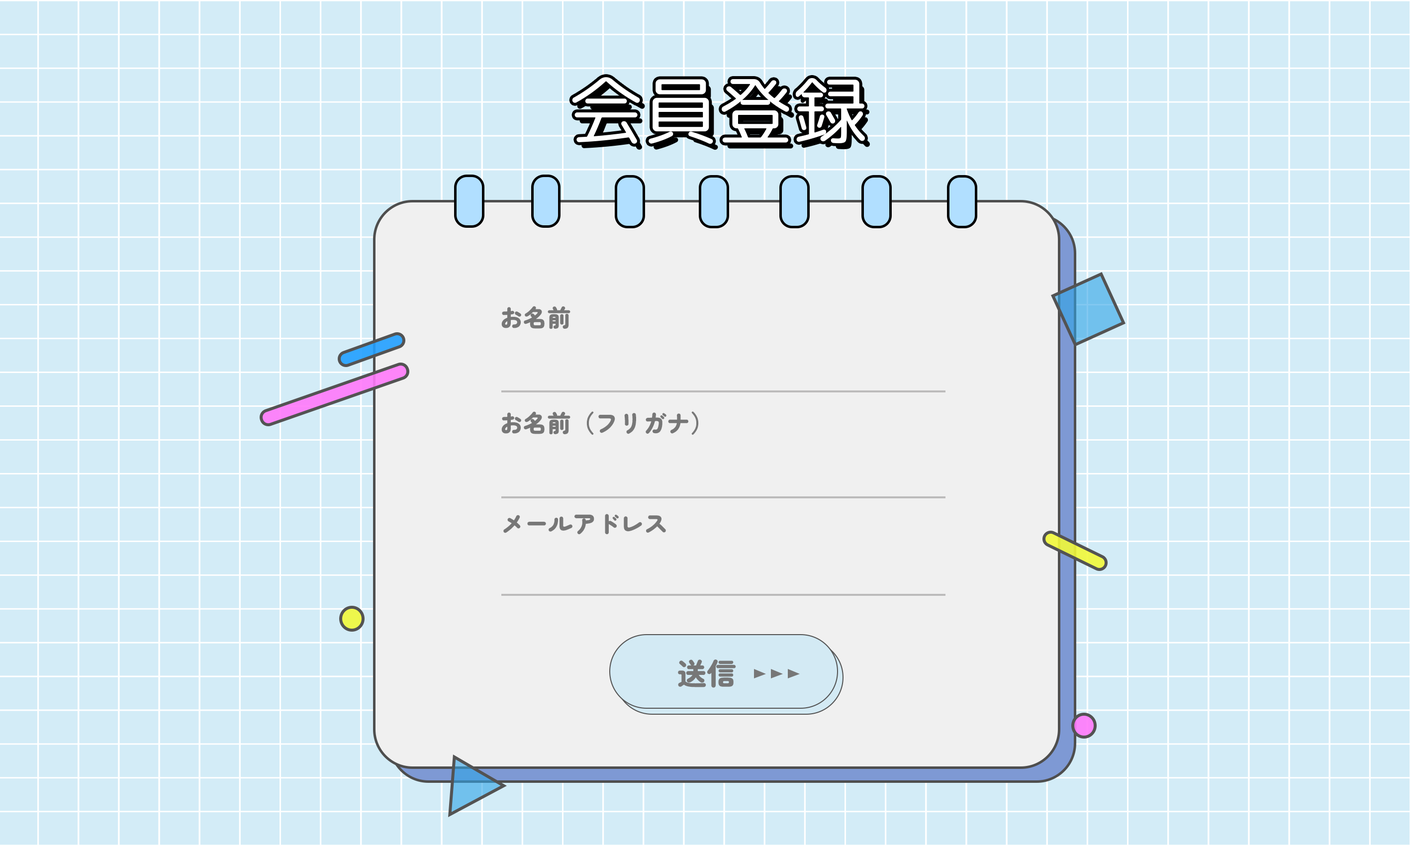
<style>
.page{position:relative;width:1410px;height:846px;background:#d3ecf7}
.page>*{position:absolute;margin:0}
.t1{font:74.6px "RoundedMplus1c-Regular";color:#ffffff}
.t2{font:74.6px "RoundedMplus1c-Regular";color:#000000}
.t3{font:23.9px "ZenMaruGothic-Black";color:#777777}
.t4{font:29.8px "ZenMaruGothic-Black";color:#777777}
</style>
<div class="page">
<p class="t1" style="left:572px;top:77px;width:293px;height:67px">会員登録</p>
<p class="t2" style="left:577px;top:83px;width:293px;height:67px">会員登録</p>
<p class="t3" style="left:501px;top:306px;width:69px;height:23px">お名前</p>
<p class="t3" style="left:501px;top:411px;width:198px;height:24px">お名前（フリガナ）</p>
<p class="t3" style="left:503px;top:514px;width:163px;height:21px">メールアドレス</p>
<p class="t4" style="left:678px;top:659px;width:58px;height:29px">送信</p>
</div>
